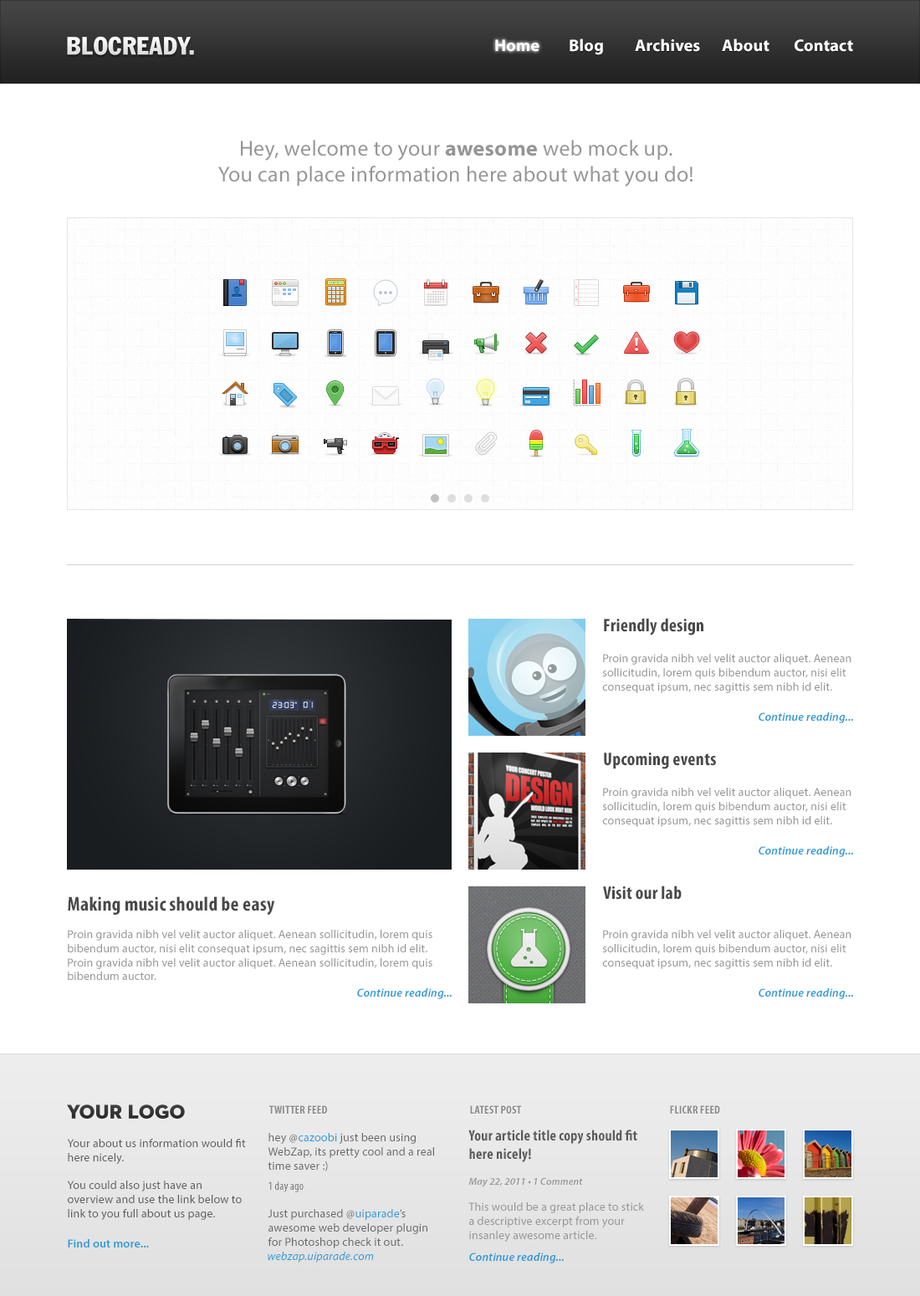
<style>
.page{position:relative;width:920px;height:1296px;background:#ffffff}
.page>*{position:absolute;margin:0}
.t1{font:16.7px "MyriadPro-Bold";letter-spacing:0.013em;color:#ffffff}
.t2{font:21.7px "MyriadPro-Regular";letter-spacing:0.013em;color:#959595}
.t3{font:21.7px "MyriadPro-Bold";letter-spacing:0.013em;color:#959595}
.t4{font:18.4px "MyriadPro-BoldCond";letter-spacing:0.013em;color:#494949}
.t5{font:11.7px "MyriadPro-Regular";letter-spacing:0.013em;color:#959595}
.t6{font:11.7px "MyriadPro-SemiboldIt";letter-spacing:0.013em;color:#2a99d8}
.t7{font:20.1px "MyriadPro-BoldCond";letter-spacing:0.013em;color:#494949}
.t8{font:11.7px "MyriadPro-BoldCond";letter-spacing:0.013em;color:#8a8989}
.t9{font:11.7px "MyriadPro-Regular";letter-spacing:0.013em;color:#6a6969}
.t10{font:11.7px/20.1px "MyriadPro-Cond";letter-spacing:0.013em;color:#6a6969}
.t11{font:11.7px "MyriadPro-Regular";letter-spacing:0.013em;color:#2a99d8}
.t12{font:15.1px "MyriadPro-BoldCond";letter-spacing:0.013em;color:#5c5b5b}
.t13{font:10px "MyriadPro-SemiboldIt";letter-spacing:0.013em;color:#999797}
.t14{font:11.7px "MyriadPro-Regular";letter-spacing:0.013em;color:#5d5c5c}
.t15{font:11.7px "MyriadPro-Semibold";letter-spacing:0.013em;color:#2a99d8}
.t16{font:11.7px "MyriadPro-It";letter-spacing:0.013em;color:#2a99d8}
</style>
<div class="page">
<p class="t1" style="left:495px;top:39px;width:44px;height:13px">Home</p>
<p class="t1" style="left:570px;top:38px;width:33px;height:17px">Blog</p>
<p class="t1" style="left:635px;top:38px;width:65px;height:14px">Archives</p>
<p class="t1" style="left:722px;top:38px;width:47px;height:14px">About</p>
<p class="t1" style="left:794px;top:39px;width:59px;height:13px">Contact</p>
<p class="t2" style="left:218px;top:140px;width:474px;height:46px;text-align:center">Hey, welcome to your <span class="t3">awesome</span> web mock up. <br>You can place information here about what you do!</p>
<p class="t4" style="left:604px;top:618px;width:99px;height:18px">Friendly design</p>
<p class="t5" style="left:602px;top:654px;width:249px;height:39px">Proin gravida nibh vel velit auctor aliquet. Aenean sollicitudin, lorem quis bibendum auctor, nisi elit consequat ipsum, nec sagittis sem nibh id elit.</p>
<p class="t6" style="left:759px;top:713px;width:94px;height:10px">Continue reading...</p>
<p class="t4" style="left:604px;top:753px;width:112px;height:16px">Upcoming events</p>
<p class="t5" style="left:602px;top:788px;width:249px;height:39px">Proin gravida nibh vel velit auctor aliquet. Aenean sollicitudin, lorem quis bibendum auctor, nisi elit consequat ipsum, nec sagittis sem nibh id elit.</p>
<p class="t6" style="left:759px;top:846px;width:94px;height:11px">Continue reading...</p>
<p class="t4" style="left:603px;top:886px;width:79px;height:14px">Visit our lab</p>
<p class="t7" style="left:68px;top:896px;width:207px;height:20px">Making music should be easy</p>
<p class="t5" style="left:68px;top:930px;width:364px;height:50px">Proin gravida nibh vel velit auctor aliquet. Aenean sollicitudin, lorem quis bibendum auctor, nisi elit consequat ipsum, nec sagittis sem nibh id elit.<br>Proin gravida nibh vel velit auctor aliquet. Aenean sollicitudin, lorem quis bibendum auctor.</p>
<p class="t5" style="left:602px;top:930px;width:249px;height:39px">Proin gravida nibh vel velit auctor aliquet. Aenean sollicitudin, lorem quis bibendum auctor, nisi elit consequat ipsum, nec sagittis sem nibh id elit.</p>
<p class="t6" style="left:357px;top:988px;width:95px;height:11px">Continue reading...</p>
<p class="t6" style="left:759px;top:988px;width:94px;height:11px">Continue reading...</p>
<p class="t8" style="left:269px;top:1106px;width:58px;height:8px">TWITTER FEED</p>
<p class="t8" style="left:470px;top:1106px;width:51px;height:8px">LATEST POST</p>
<p class="t8" style="left:670px;top:1106px;width:50px;height:8px">FLICKR FEED</p>
<p class="t9" style="left:268px;top:1133px;width:166px;height:116px">hey @                just been using WebZap, its pretty cool and a real time saver :)<br><span class="t10">1 day ago<br></span><br>Just purchased @                 ’s <br>awesome web developer plugin for Photoshop check it out.</p>
<p class="t11" style="left:299px;top:1133px;width:38px;height:9px">cazoobi</p>
<p class="t5" style="left:468px;top:1130px;width:176px;height:112px"><span class="t12">Your article title copy should fit here nicely!<br><br></span><span class="t13">May 22, 2011 • 1 Comment<br><br></span>This would be a great place to stick a descriptive excerpt from your insanley awesome article.</p>
<p class="t14" style="left:67px;top:1139px;width:179px;height:81px">Your about us information would fit here nicely. <br><br>You could also just have an overview and use the link below to link to you full about us page.</p>
<p class="t11" style="left:355px;top:1209px;width:45px;height:11px">uiparade</p>
<p class="t15" style="left:68px;top:1239px;width:81px;height:9px">Find out more...</p>
<p class="t16" style="left:268px;top:1252px;width:106px;height:11px">webzap.uiparade.com</p>
<p class="t6" style="left:469px;top:1253px;width:95px;height:11px">Continue reading...</p>
</div>
